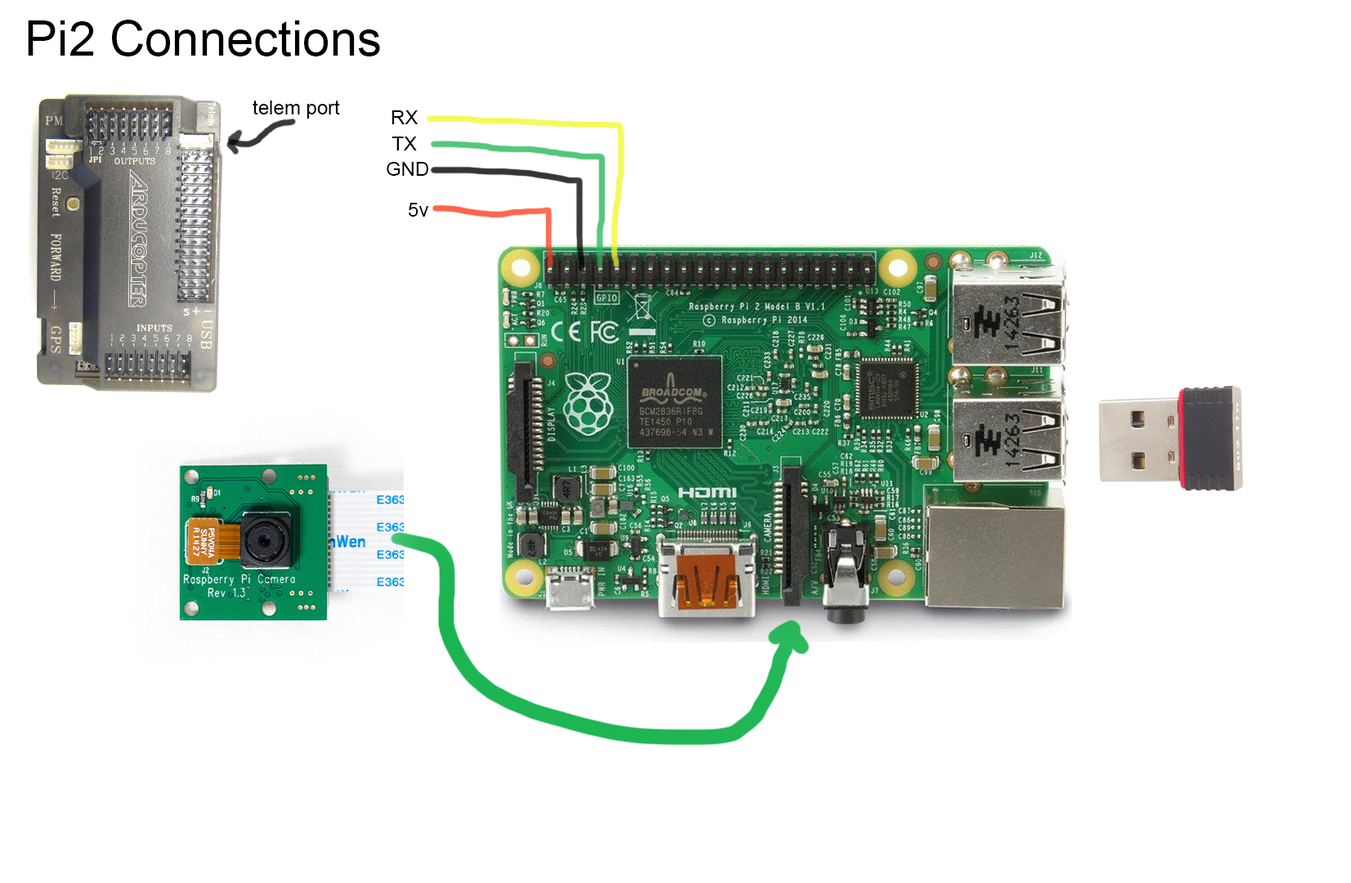
<style>
.page{position:relative;width:1351px;height:883px;background:#ffffff}
.page>*{position:absolute;margin:0}
.t1{font:49px "ArialMT";color:#000000}
.t2{font:19.6px "ArialMT";color:#000000}
</style>
<div class="page">
<p class="t1" style="left:28px;top:20px;width:352px;height:36px">Pi2 Connections</p>
<p class="t2" style="left:253px;top:100px;width:87px;height:19px">telem port</p>
<p class="t2" style="left:391px;top:110px;width:27px;height:14px">RX</p>
<p class="t2" style="left:391px;top:136px;width:26px;height:14px">TX</p>
<p class="t2" style="left:387px;top:162px;width:42px;height:14px">GND</p>
<p class="t2" style="left:409px;top:203px;width:20px;height:14px">5v</p>
</div>
